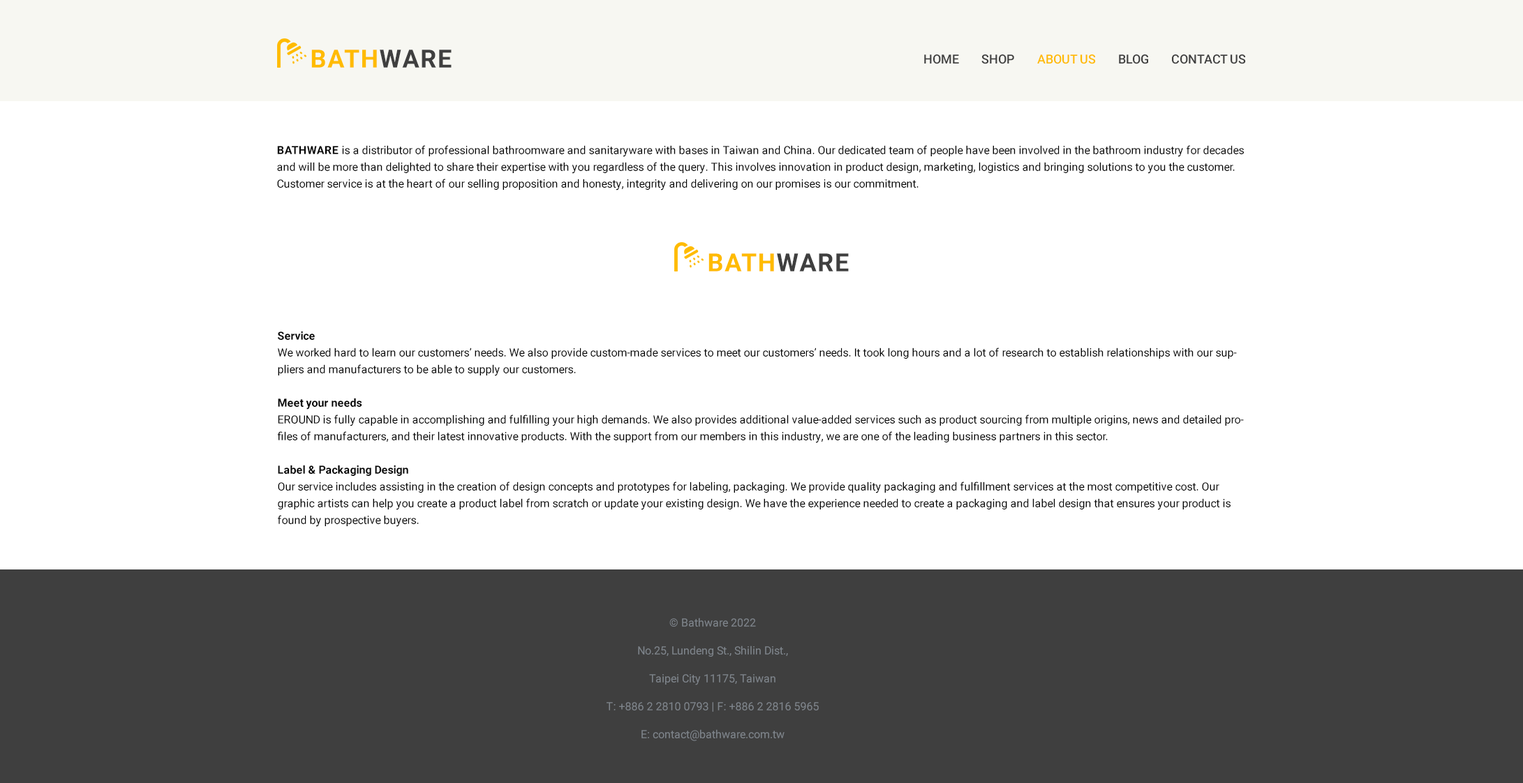
<style>
.page{position:relative;width:1523px;height:783px;background:#ffffff}
.page>*{position:absolute;margin:0}
.t1{font:25.1px "Roboto-Bold";letter-spacing:0.05em;color:#ffbb00;text-transform:uppercase}
.t2{font:25.1px "Roboto-Bold";letter-spacing:0.05em;color:#3f3f3f;text-transform:uppercase}
.t3{font:12.6px "Roboto-Medium";color:#3f3f3f;text-transform:uppercase}
.t4{font:12.6px "Roboto-Medium";color:#ffbb00;text-transform:uppercase}
.t5{font:11.2px/16.7px "Roboto-Regular";color:#030303}
.t6{font:11.2px/16.7px "Roboto-Bold";color:#030303;text-transform:uppercase}
.t7{font:11.2px/16.7px "Roboto-Bold";color:#030303}
.t8{font:11.2px/27.9px "Roboto-Regular";color:#7f858c}
</style>
<div class="page">
<p class="t1" style="left:311px;top:50px;width:141px;height:18px">bath<span class="t2">ware</span></p>
<p class="t3" style="left:924px;top:54px;width:322px;height:10px">home        shop        <span class="t4">about us</span>        blog        contact us</p>
<p class="t5" style="left:277px;top:145px;width:967px;height:46px"><span class="t6">Bathware</span> is a distributor of professional bathroomware and sanitaryware with bases in Taiwan and China. Our dedicated team of people have been involved in the bathroom industry for decades and will be more than delighted to share their expertise with you regardless of the query. This involves innovation in product design, marketing, logistics and bringing solutions to you the customer. Customer service is at the heart of our selling proposition and honesty, integrity and delivering on our promises is our commitment.</p>
<p class="t1" style="left:708px;top:253px;width:141px;height:18px">bath<span class="t2">ware</span></p>
<p class="t5" style="left:277px;top:331px;width:967px;height:196px"><span class="t7">Service<br></span>We worked hard to learn our customers’ needs. We also provide custom-made services to meet our customers’ needs. It took long hours and a lot of research to establish relationships with our suppliers and manufacturers to be able to supply our customers.<br><br><span class="t7">Meet your needs<br></span>EROUND is fully capable in accomplishing and fulfilling your high demands. We also provides additional value-added services such as product sourcing from multiple origins, news and detailed profiles of manufacturers, and their latest innovative products. With the support from our members in this industry, we are one of the leading business partners in this sector.<br><br><span class="t7">Label &amp; Packaging Design<br></span>Our service includes assisting in the creation of design concepts and prototypes for labeling, packaging. We provide quality packaging and fulfillment services at the most competitive cost. Our graphic artists can help you create a product label from scratch or update your existing design. We have the experience needed to create a packaging and label design that ensures your product is found by prospective buyers.</p>
<p class="t8" style="left:606px;top:618px;width:213px;height:123px;text-align:center">© Bathware 2022<br>No.25, Lundeng St., Shilin Dist.,<br>Taipei City 11175, Taiwan<br>T: +886 2 2810 0793 | F: +886 2 2816 5965<br>E: contact@bathware.com.tw</p>
</div>
